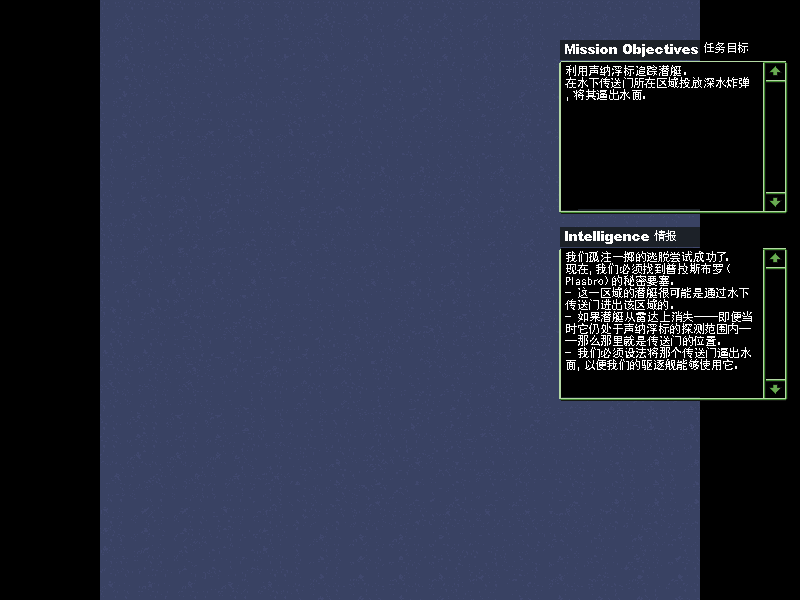
<style>
.page{position:relative;width:800px;height:600px;background:#394263}
.page>*{position:absolute;margin:0}
.t1{font:12px "SimHei";color:#ffffff}
.t2{font:12px/12px "SimHei";color:#ffffff}
</style>
<div class="page">
<p class="t1" style="left:704px;top:42px;width:44px;height:11px">任务目标</p>
<p class="t2" style="left:565px;top:65px;width:184px;height:36px">利用声纳浮标追踪潜艇。<br>在水下传送门所在区域投放深水炸弹，将其逼出水面。</p>
<p class="t1" style="left:654px;top:230px;width:22px;height:11px">情报</p>
<p class="t2" style="left:565px;top:251px;width:187px;height:120px">我们孤注一掷的逃脱尝试成功了。<br>现在，我们必须找到普拉斯布罗（Plasbro）的秘密要塞。<br>- 这一区域的潜艇很可能是通过水下传送门进出该区域的。<br>- 如果潜艇从雷达上消失——即便当时它仍处于声纳浮标的探测范围内——那么那里就是传送门的位置。<br>- 我们必须设法将那个传送门逼出水面，以便我们的驱逐舰能够使用它。</p>
</div>
